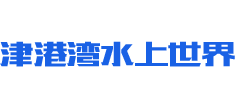
<style>
.page{position:relative;width:236px;height:102px;background:#ffffff}
.page>*{position:absolute;margin:0}
.t1{font:33px "MFBanHei_Noncommercial-Regular";letter-spacing:0.02em;color:#1961e5}
</style>
<div class="page">
<p class="t1" style="left:0px;top:41px;width:235px;height:26px">津港湾水上世界</p>
</div>
